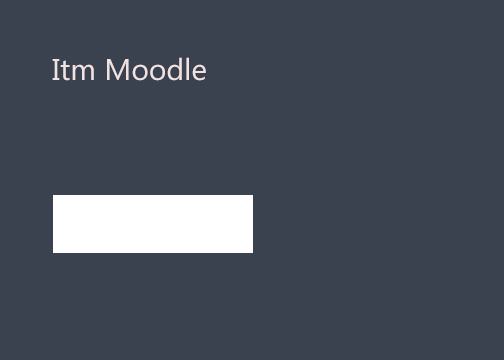
<style>
.page{position:relative;width:504px;height:360px;background:#39424e}
.page>*{position:absolute;margin:0}
.t1{font:30px "LaoUI";color:#f2e3e3}
</style>
<div class="page">
<p class="t1" style="left:52px;top:57px;width:154px;height:24px">Itm Moodle</p>
</div>
